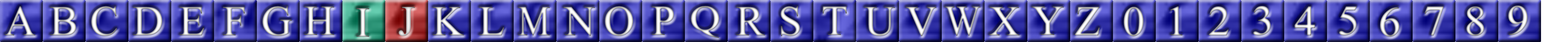
<style>
.page{position:relative;width:1568px;height:42px}
.page>*{position:absolute;margin:0}
.t1{font:42.8px "TimesNewRomanPSMT";font-weight:bold}
.t2{font:36.4px "TimesNewRomanPSMT";font-weight:bold;scale:1.18 1}
.t3{font:42.8px "TimesNewRomanPSMT";font-weight:bold;scale:1.05 1}
.t4{font:42.8px "TimesNewRomanPSMT";font-weight:bold;scale:0.85 1}
.t5{font:42.8px "TimesNewRomanPSMT";font-weight:bold;scale:0.9 1}
</style>
<div class="page">
<p class="t1" style="left:5px;top:6px;width:31px;height:30px">A</p>
<p class="t1" style="left:91px;top:6px;width:26px;height:30px">C</p>
<p class="t1" style="left:262px;top:6px;width:30px;height:30px">G</p>
<p class="t1" style="left:605px;top:6px;width:28px;height:30px">O</p>
<p class="t2" style="left:691px;top:6px;width:28px;height:32px">Q</p>
<p class="t1" style="left:780px;top:6px;width:20px;height:30px">S</p>
<p class="t3" style="left:1253px;top:6px;width:18px;height:30px">3</p>
<p class="t3" style="left:1508px;top:6px;width:20px;height:30px">9</p>
<p class="t1" style="left:50px;top:7px;width:26px;height:29px">B</p>
<p class="t1" style="left:133px;top:7px;width:29px;height:29px">D</p>
<p class="t1" style="left:179px;top:7px;width:26px;height:29px">E</p>
<p class="t1" style="left:223px;top:7px;width:22px;height:29px">F</p>
<p class="t1" style="left:304px;top:6px;width:30px;height:30px">H</p>
<p class="t1" style="left:357px;top:8px;width:12px;height:29px">I</p>
<p class="t1" style="left:399px;top:7px;width:16px;height:29px">J</p>
<p class="t1" style="left:433px;top:7px;width:31px;height:29px">K</p>
<p class="t1" style="left:479px;top:7px;width:25px;height:29px">L</p>
<p class="t4" style="left:518px;top:7px;width:32px;height:29px">M</p>
<p class="t1" style="left:563px;top:7px;width:32px;height:29px">N</p>
<p class="t1" style="left:652px;top:6px;width:22px;height:30px">P</p>
<p class="t1" style="left:736px;top:7px;width:29px;height:29px">R</p>
<p class="t1" style="left:822px;top:6px;width:25px;height:30px">T</p>
<p class="t1" style="left:864px;top:7px;width:31px;height:29px">U</p>
<p class="t1" style="left:906px;top:7px;width:31px;height:29px">V</p>
<p class="t5" style="left:945px;top:6px;width:36px;height:30px">W</p>
<p class="t1" style="left:989px;top:7px;width:31px;height:29px">X</p>
<p class="t3" style="left:1032px;top:6px;width:32px;height:30px">Y</p>
<p class="t1" style="left:1074px;top:7px;width:26px;height:29px">Z</p>
<p class="t3" style="left:1124px;top:7px;width:20px;height:30px">0</p>
<p class="t3" style="left:1170px;top:6px;width:13px;height:30px">1</p>
<p class="t3" style="left:1208px;top:6px;width:21px;height:30px">2</p>
<p class="t3" style="left:1294px;top:6px;width:21px;height:30px">4</p>
<p class="t3" style="left:1339px;top:6px;width:18px;height:30px">5</p>
<p class="t3" style="left:1380px;top:7px;width:19px;height:30px">6</p>
<p class="t3" style="left:1424px;top:6px;width:20px;height:30px">7</p>
<p class="t3" style="left:1466px;top:6px;width:18px;height:30px">8</p>
</div>
